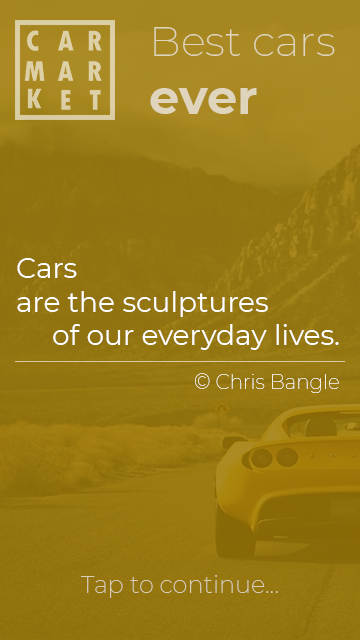
<style>
.page{position:relative;width:360px;height:640px}
.page>*{position:absolute;margin:0}
.t1{font:42px "Montserrat-ExtraLight";color:#dfd5bc}
.t2{font:48px "Montserrat-Bold";color:#dfd5bc}
.t3{font:28px "Montserrat-Regular";color:#ffffff}
.t4{font:20px "Montserrat-Thin";color:#ffffff}
.t5{font:24px "Montserrat-ExtraLight";color:#d9cfba}
</style>
<div class="page">
<p class="t1" style="left:150px;top:27px;width:185px;height:87px">Best cars<br><span class="t2">ever</span></p>
<p class="t3" style="left:17px;top:258px;width:322px;height:92px">Cars <br>are the sculptures<br> of our everyday lives.</p>
<p class="t4" style="left:195px;top:373px;width:144px;height:20px">© Chris Bangle</p>
<p class="t5" style="left:81px;top:575px;width:197px;height:23px">Tap to continue...</p>
</div>
